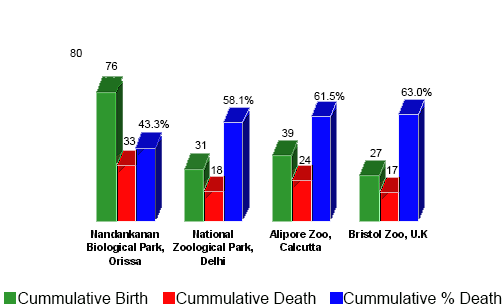
<style>
.page{position:relative;width:503px;height:308px;background:#ffffff}
.page>*{position:absolute;margin:0}
.t1{font:11px "ArialMT";color:#000000}
.t2{font:16px "ArialMT";color:#000500}
</style>
<div class="page">
<p class="t1" style="left:70px;top:49px;width:12px;height:8px">80</p>
<p class="t1" style="left:105px;top:62px;width:13px;height:8px">76</p>
<p class="t1" style="left:401px;top:88px;width:31px;height:8px">63.0%</p>
<p class="t1" style="left:223px;top:96px;width:31px;height:8px">58.1%</p>
<p class="t1" style="left:314px;top:92px;width:31px;height:8px">61.5%</p>
<p class="t1" style="left:138px;top:120px;width:31px;height:8px">43.3%</p>
<p class="t1" style="left:123px;top:137px;width:13px;height:8px">33</p>
<p class="t1" style="left:282px;top:129px;width:12px;height:8px">39</p>
<p class="t1" style="left:195px;top:141px;width:11px;height:8px">31</p>
<p class="t1" style="left:370px;top:149px;width:12px;height:8px">27</p>
<p class="t1" style="left:299px;top:156px;width:12px;height:8px">24</p>
<p class="t1" style="left:211px;top:166px;width:12px;height:8px">18</p>
<p class="t1" style="left:387px;top:166px;width:11px;height:8px">17</p>
<p class="t2" style="left:18px;top:292px;width:130px;height:12px">Cummulative Birth</p>
<p class="t2" style="left:176px;top:292px;width:140px;height:12px">Cummulative Death</p>
<p class="t2" style="left:343px;top:292px;width:159px;height:12px">Cummulative % Death</p>
</div>
